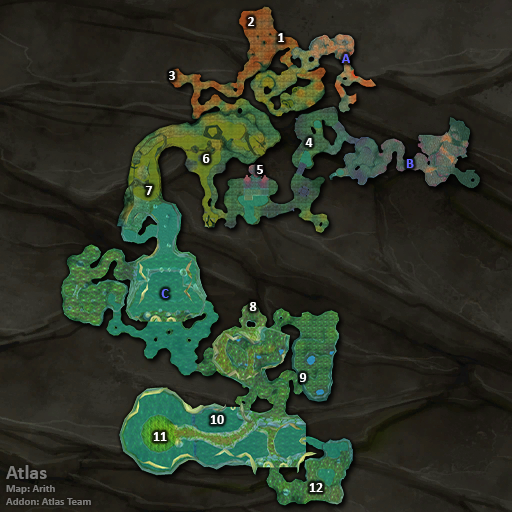
<style>
.page{position:relative;width:512px;height:512px}
.page>*{position:absolute;margin:0}
.t1{font:14px "Calibri-Bold";color:#ffffff}
.t2{font:14px "Calibri-Bold";color:#6666ff}
.t3{font:11px "Calibri-Bold";color:#7d7c7a}
.t4{font:20px "Calibri-Bold";color:#7d7c7a}
</style>
<div class="page">
<p class="t1" style="left:248px;top:17px;width:7px;height:9px">2</p>
<p class="t1" style="left:278px;top:33px;width:6px;height:9px">1</p>
<p class="t2" style="left:341px;top:54px;width:9px;height:9px">A</p>
<p class="t1" style="left:169px;top:71px;width:6px;height:9px">3</p>
<p class="t1" style="left:305px;top:138px;width:8px;height:9px">4</p>
<p class="t1" style="left:203px;top:154px;width:7px;height:9px">6</p>
<p class="t2" style="left:406px;top:159px;width:8px;height:9px">B</p>
<p class="t1" style="left:257px;top:165px;width:6px;height:9px">5</p>
<p class="t1" style="left:145px;top:186px;width:8px;height:9px">7</p>
<p class="t2" style="left:161px;top:289px;width:8px;height:9px">C</p>
<p class="t1" style="left:249px;top:302px;width:8px;height:9px">8</p>
<p class="t1" style="left:299px;top:373px;width:8px;height:9px">9</p>
<p class="t1" style="left:210px;top:415px;width:14px;height:9px">10</p>
<p class="t1" style="left:153px;top:432px;width:14px;height:9px">11</p>
<p class="t3" style="left:6px;top:465px;width:85px;height:40px"><span class="t4">Atlas<br></span>Map: Arith<br>Addon: Atlas Team</p>
<p class="t1" style="left:309px;top:483px;width:14px;height:9px">12</p>
</div>
